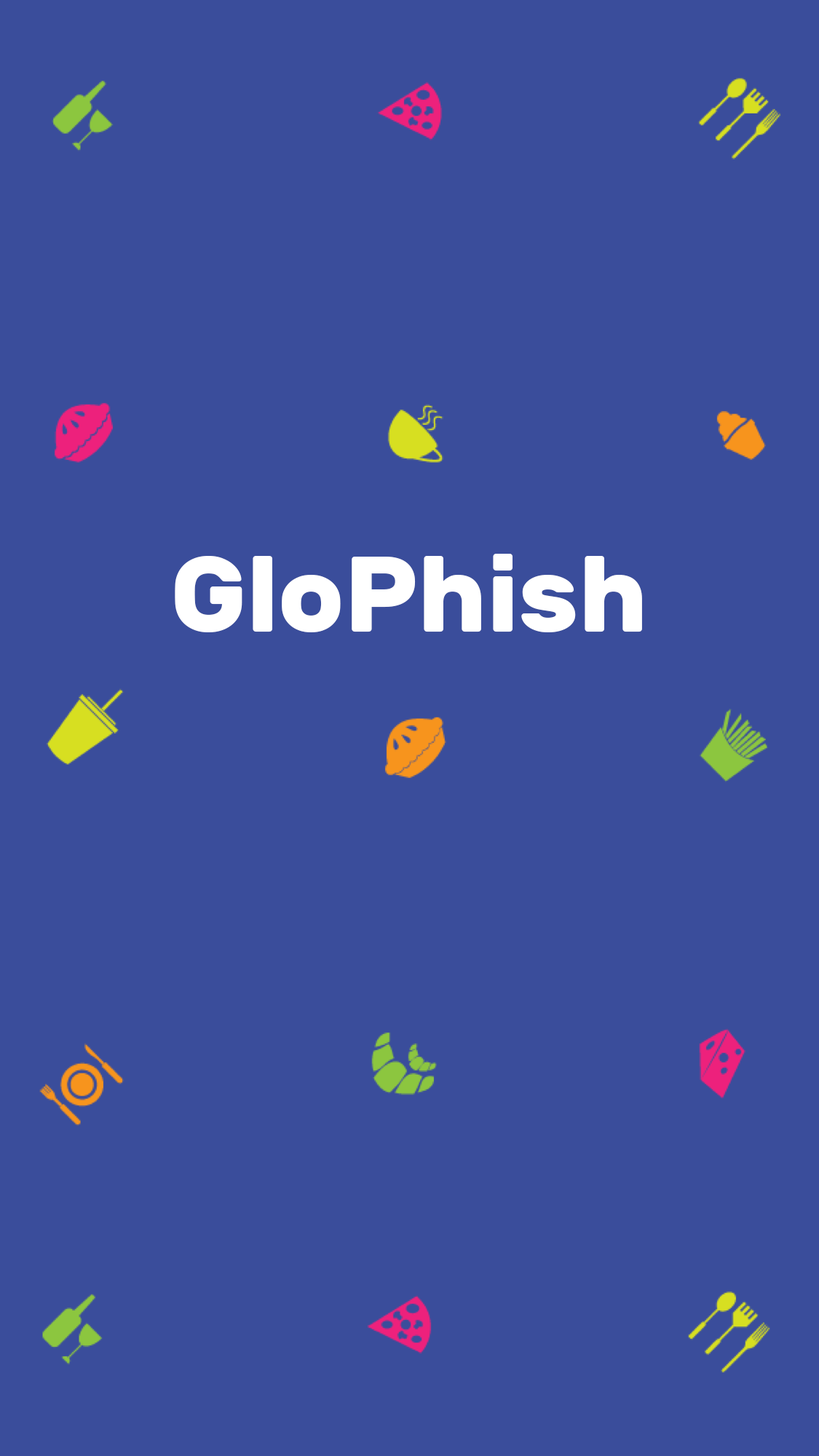
<style>
.page{position:relative;width:819px;height:1456px;background:#3a4d9b}
.page>*{position:absolute;margin:0}
.t1{font:107.2px "Rubik-Bold";color:#ffffff}
</style>
<div class="page">
<p class="t1" style="left:175px;top:554px;width:467px;height:78px">GloPhish</p>
</div>
